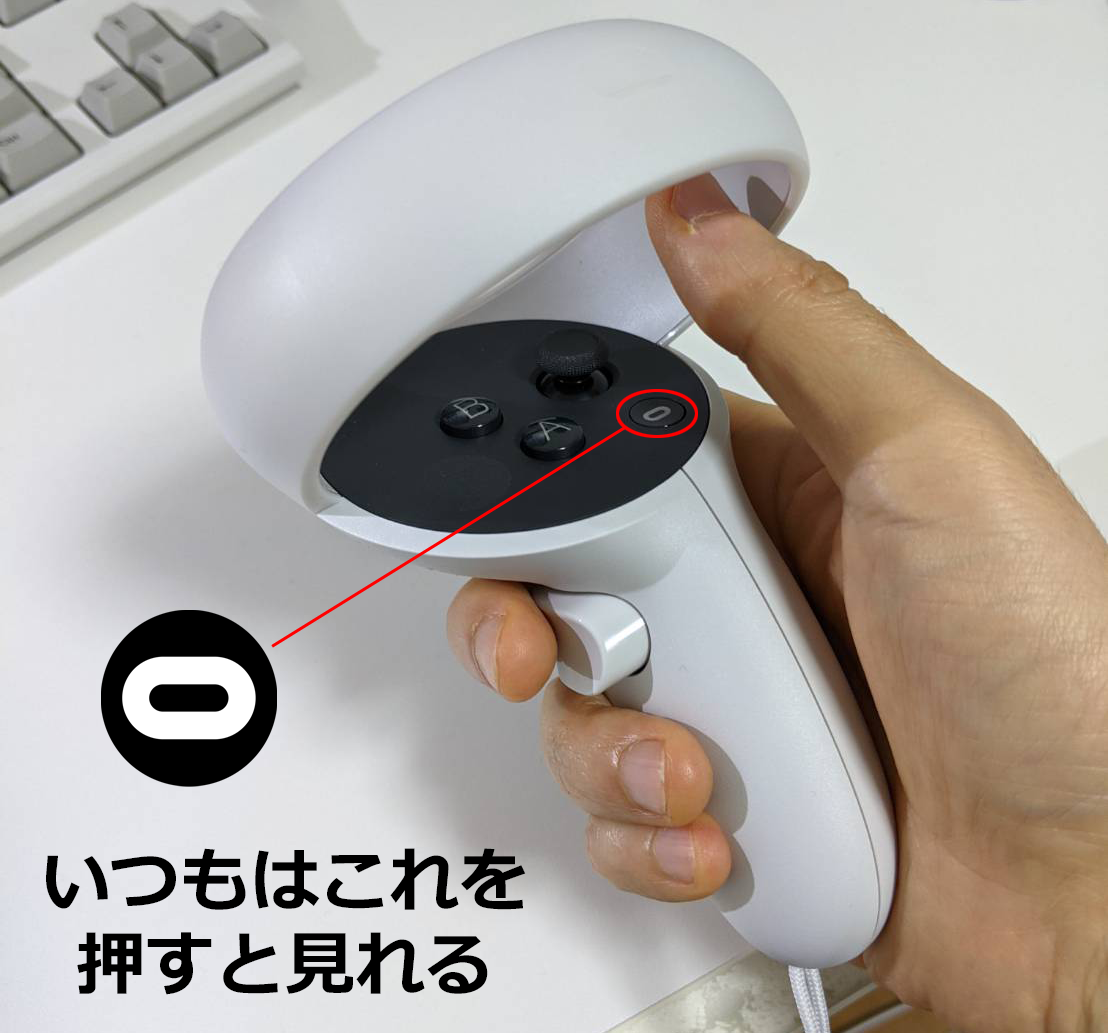
<style>
.page{position:relative;width:1108px;height:1033px}
.page>*{position:absolute;margin:0}
.t1{font:69.7px/84.7px "Meiryo-Bold";color:#000000}
</style>
<div class="page">
<p class="t1" style="left:46px;top:848px;width:480px;height:147px;text-align:center">いつもはこれを<br>押すと見れる</p>
</div>
